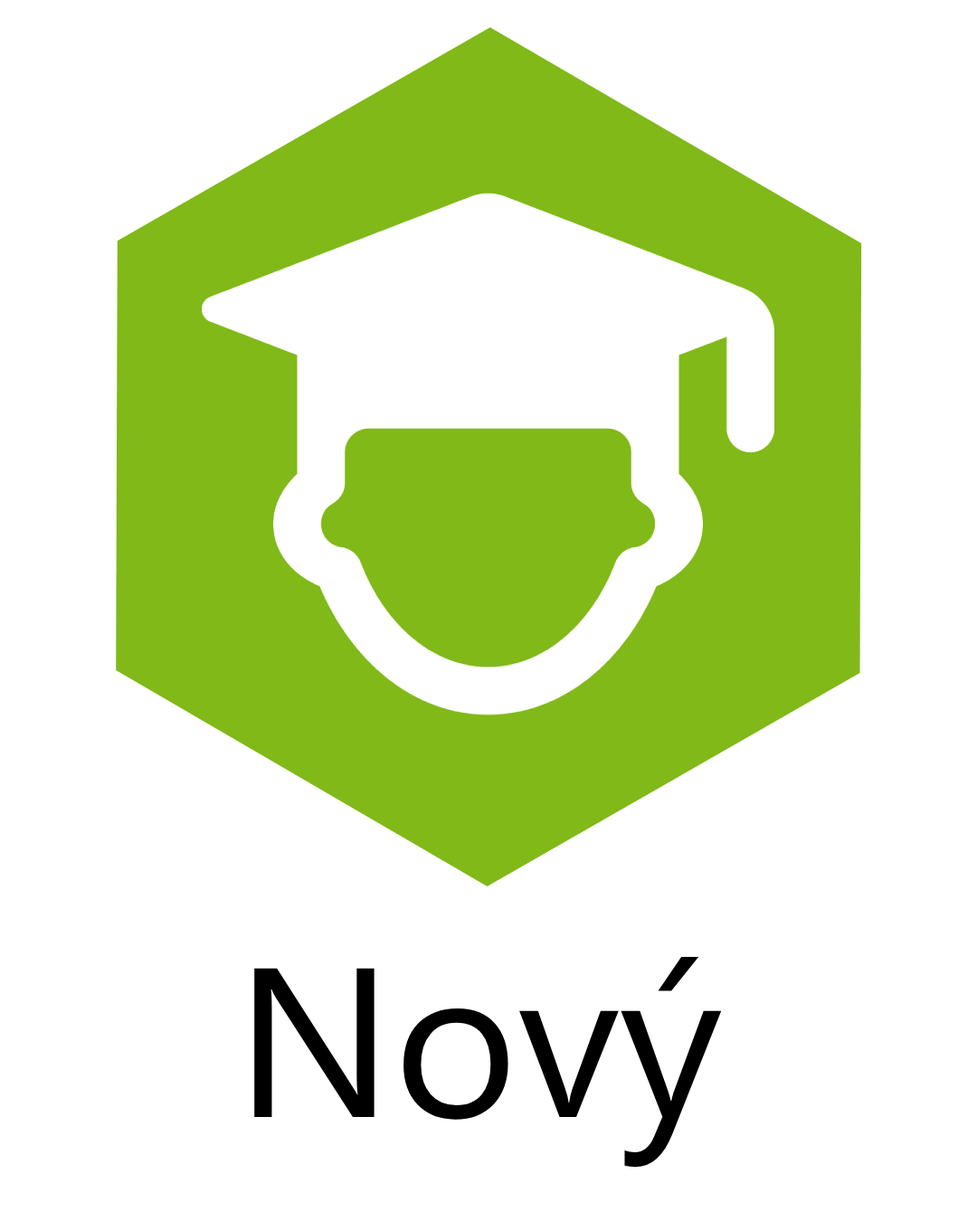
<style>
.page{position:relative;width:977px;height:1221px;background:#ffffff}
.page>*{position:absolute;margin:0}
.t1{font:212.1px "SegoeUI";color:#000000}
</style>
<div class="page">
<p class="t1" style="left:254px;top:957px;width:468px;height:211px">Nový</p>
</div>
